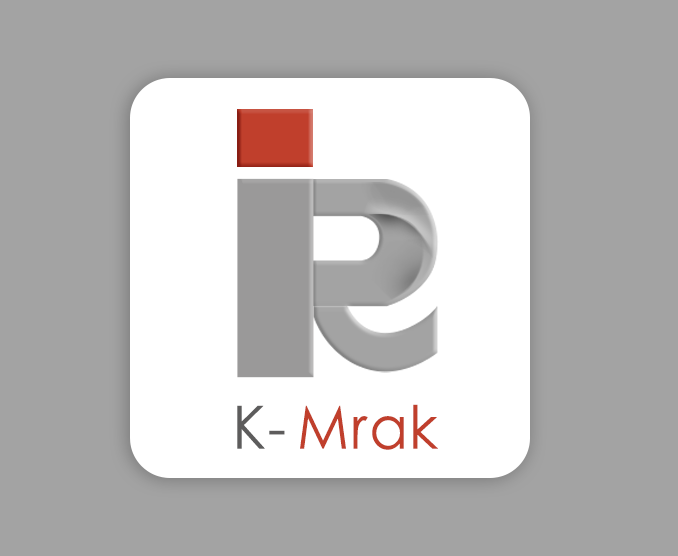
<style>
.page{position:relative;width:678px;height:556px;background:#a3a3a3}
.page>*{position:absolute;margin:0}
.t1{font:59.3px "STXihei";letter-spacing:0.03em;color:#c03f2c;scale:0.95 1}
.t2{font:59.3px "STXihei";letter-spacing:0.03em;color:#5d5c5c;scale:0.95 1}
.t3{font:59.3px "STXihei";letter-spacing:-0.03em;color:#5d5c5c;scale:0.95 1}
</style>
<div class="page">
<p class="t1" style="left:237px;top:404px;width:201px;height:46px"><span class="t2">K</span><span class="t3">- </span>Mrak</p>
</div>
